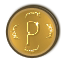
<style>
.page{position:relative;width:64px;height:64px;background:#ffffff}
.page>*{position:absolute;margin:0}
.t1{font:8.3px "Calibri";scale:0.85 1}
.t2{font:8.3px "Calibri";color:#ffffab;scale:0.85 1}
.t3{font:40.1px "Calibri";scale:0.85 1}
</style>
<div class="page">
<p class="t1" style="left:25px;top:10px;width:16px;height:10px">point</p>
<p class="t2" style="left:10px;top:24px;width:11px;height:16px;rotate:-90deg">point</p>
<p class="t3" style="left:26px;top:20px;width:14px;height:26px">P</p>
<p class="t1" style="left:44px;top:23px;width:11px;height:16px;rotate:90deg">point</p>
<p class="t1" style="left:24px;top:44px;width:16px;height:11px;rotate:180deg">point</p>
</div>
